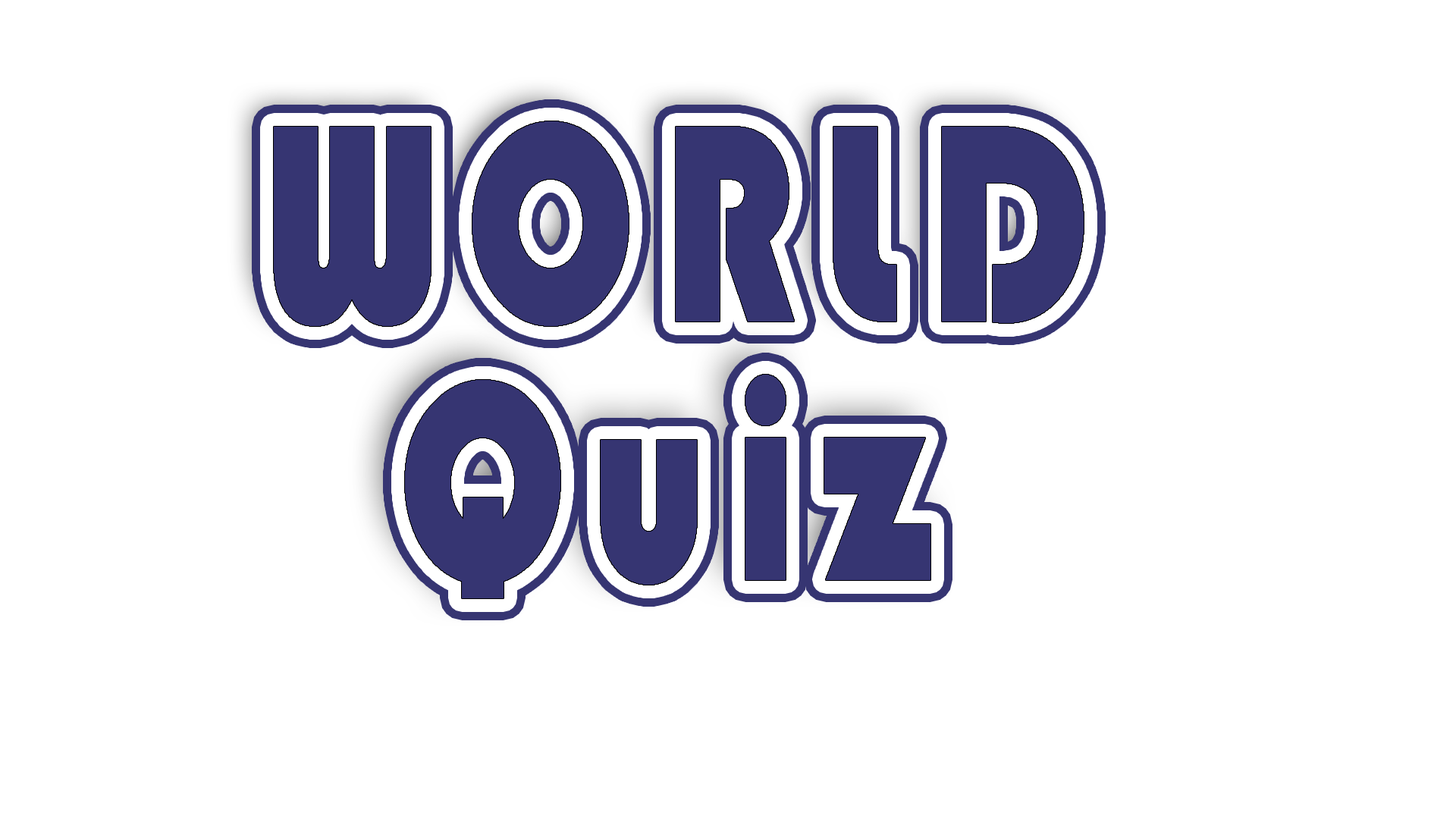
<style>
.page{position:relative;width:1456px;height:819px;background:#ffffff}
.page>*{position:absolute;margin:0}
.t1{font:292.6px "Bauhaus93";letter-spacing:0.12em;color:#363572;scale:0.76 1}
.t2{font:292.6px "Bauhaus93";letter-spacing:0.1em;color:#363572;scale:0.76 1}
.t3{font:292.6px "Bauhaus93";letter-spacing:0.26em;color:#363572;scale:0.76 1}
</style>
<div class="page">
<p class="t1" style="left:274px;top:121px;width:810px;height:205px">WORLD</p>
<p class="t2" style="left:405px;top:375px;width:525px;height:223px"><span class="t3"><br></span>Quiz</p>
</div>
